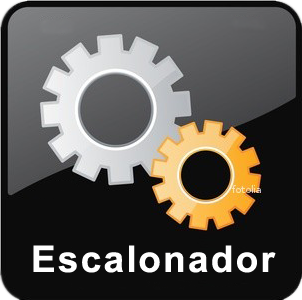
<style>
.page{position:relative;width:302px;height:300px;background:#0c0c0c}
.page>*{position:absolute;margin:0}
.t1{font:37px "Arial-BoldMT";letter-spacing:0.05em;color:#ffffff}
</style>
<div class="page">
<p class="t1" style="left:33px;top:245px;width:243px;height:28px">Escalonador</p>
</div>
